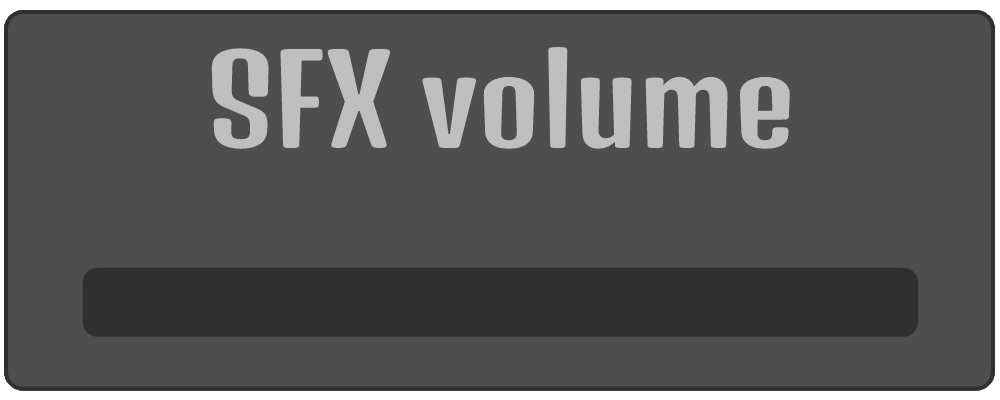
<style>
.page{position:relative;width:1000px;height:400px;background:#4e4e4e}
.page>*{position:absolute;margin:0}
.t1{font:120px "DenkOne-Regular";color:#bfbfbf}
</style>
<div class="page">
<p class="t1" style="left:211px;top:46px;width:579px;height:103px">SFX volume</p>
</div>
